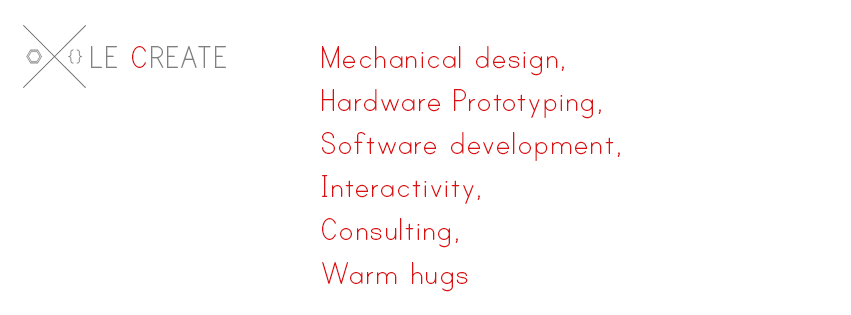
<style>
.page{position:relative;width:851px;height:315px;background:#ffffff}
.page>*{position:absolute;margin:0}
.t1{font:36px "PrintClearly";color:#808080}
.t2{font:36px "PrintClearly";color:#dc1010}
</style>
<div class="page">
<p class="t1" style="left:91px;top:46px;width:135px;height:22px">LE <span class="t2">C</span>REATE</p>
<p class="t2" style="left:322px;top:46px;width:298px;height:246px">Mechanical design,<br>Hardware Prototyping,<br>Software development,<br>Interactivity,<br>Consulting,<br>Warm hugs</p>
</div>
